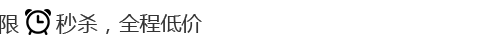
<style>
.page{position:relative;width:500px;height:45px;background:#ffffff}
.page>*{position:absolute;margin:0}
.t1{font:20.9px "MicrosoftYaHei";color:#343434}
</style>
<div class="page">
<p class="t1" style="left:0px;top:13px;width:202px;height:21px">限      秒杀，全程低价</p>
</div>
